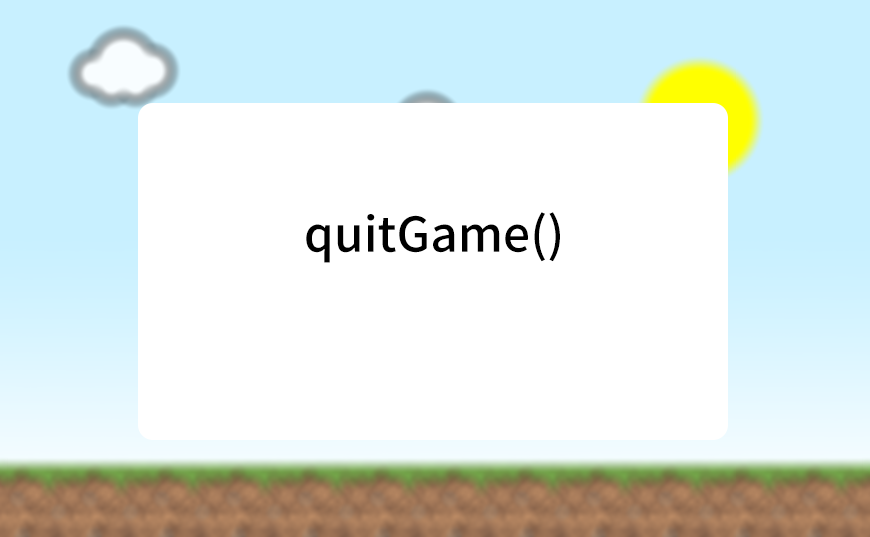
<style>
.page{position:relative;width:870px;height:537px;background:#ffffff}
.page>*{position:absolute;margin:0}
.t1{font:48px "NotoSansHant-Medium";color:#000000}
</style>
<div class="page">
<p class="t1" style="left:306px;top:212px;width:254px;height:51px">quitGame()</p>
</div>
